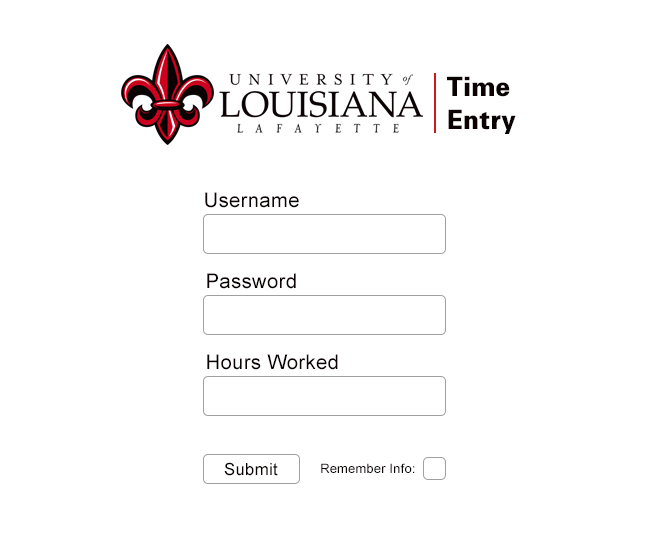
<style>
.page{position:relative;width:650px;height:550px;background:#ffffff}
.page>*{position:absolute;margin:0}
.t1{font:26.5px/32.1px "Univers75Black";letter-spacing:0.015em;color:#0a0203;scale:0.9 1}
.t2{font:20.3px "ArialMT";letter-spacing:0.015em;color:#0a0203}
.t3{font:16.8px "ArialMT";letter-spacing:0.015em;color:#0a0203}
.t4{font:12.9px "ArialMT";letter-spacing:0.015em;color:#0a0203}
</style>
<div class="page">
<p class="t1" style="left:447px;top:76px;width:69px;height:58px">Time<br>Entry</p>
<p class="t2" style="left:205px;top:192px;width:94px;height:16px">Username</p>
<p class="t2" style="left:207px;top:273px;width:89px;height:16px">Password</p>
<p class="t2" style="left:207px;top:354px;width:131px;height:16px">Hours Worked</p>
<p class="t3" style="left:224px;top:462px;width:54px;height:14px">Submit</p>
<p class="t4" style="left:321px;top:463px;width:94px;height:10px">Remember Info:</p>
</div>
